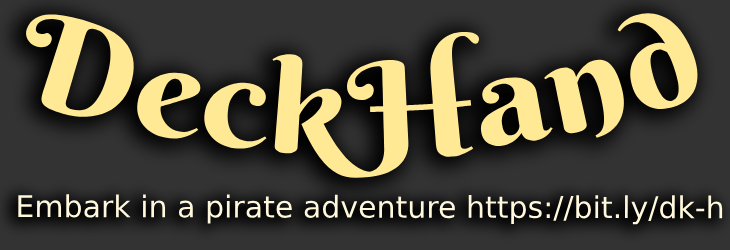
<style>
.page{position:relative;width:730px;height:250px;background:#333333}
.page>*{position:absolute;margin:0}
.t1{font:128.9px "BerkshireSwash-Regular";color:#ffe995}
.t2{font:30px "DejaVuSans";color:#fff8dc}
</style>
<div class="page">
<p class="t1" style="left:26px;top:13px;width:672px;height:165px">DeckHand</p>
<p class="t2" style="left:18px;top:194px;width:705px;height:31px">Embark in a pirate adventure https://bit.ly/dk-h</p>
</div>
